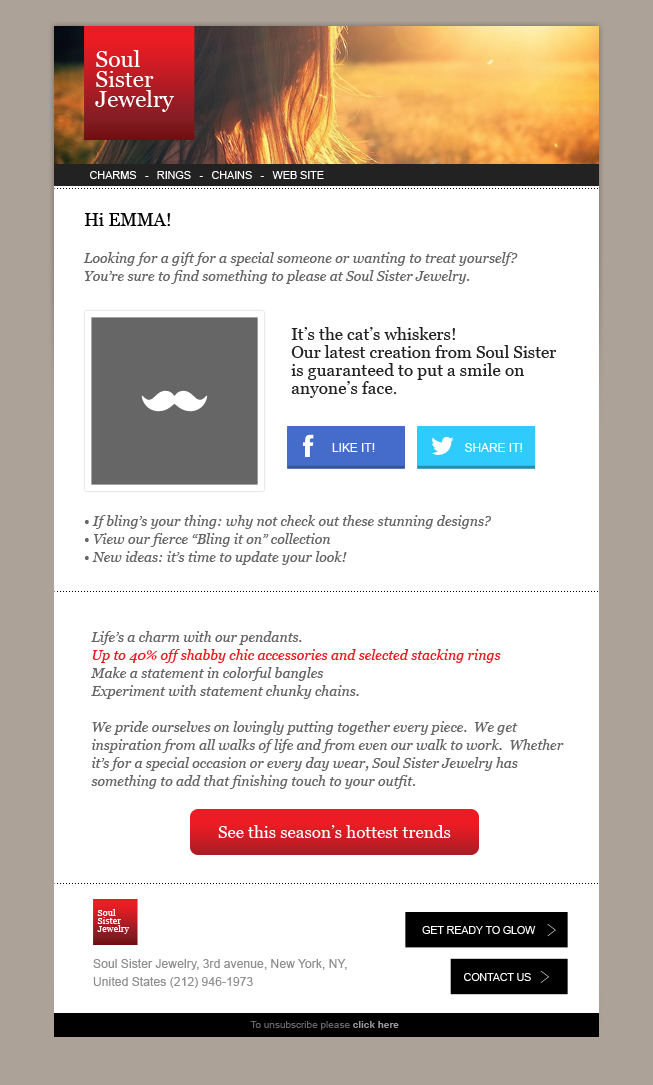
<style>
.page{position:relative;width:653px;height:1085px;background:#ffffff}
.page>*{position:absolute;margin:0}
.t1{font:23px/20px "Georgia";color:#ffffff}
.t2{font:11.2px "ArialMT";letter-spacing:-0.025em;color:#ffffff;text-transform:uppercase}
.t3{font:18px "Georgia";color:#000000;text-transform:uppercase}
.t4{font:18px "Georgia";color:#000000}
.t5{font:14px/18px "Georgia-Italic";color:#666666}
.t6{font:17px/18px "Georgia";color:#222222}
.t7{font:11.9px "ArialMT";color:#ffffff}
.t8{font:14px/18px "Georgia-Italic";color:#ed1c24}
.t9{font:17px "Georgia";color:#ffffff}
.t10{font:9.3px/8.1px "Georgia";color:#ffffff}
.t11{font:10.5px "ArialMT";color:#ffffff;text-transform:uppercase}
.t12{font:12px/18px "ArialMT";color:#8f8f8f}
.t13{font:10px "ArialMT";color:#666666}
.t14{font:10px "Arial-BoldMT";color:#999999}
</style>
<div class="page">
<p class="t1" style="left:95px;top:50px;width:79px;height:62px">Soul <br>Sister<br>Jewelry</p>
<p class="t2" style="left:90px;top:171px;width:234px;height:8px">CHARMS   -   RINGS   -   CHAINS   -   WEB SITE</p>
<p class="t3" style="left:84px;top:213px;width:86px;height:13px">H<span class="t4">i</span> Emma!</p>
<p class="t5" style="left:83px;top:252px;width:435px;height:32px">Looking for a gift for a special someone or wanting to treat yourself?   <br>You’re sure to find something to please at Soul Sister Jewelry.</p>
<p class="t6" style="left:291px;top:327px;width:266px;height:71px">It’s the cat’s whiskers!  <br>Our latest creation from Soul Sister <br>is guaranteed to put a smile on anyone’s face.</p>
<p class="t7" style="left:332px;top:443px;width:43px;height:9px">LIKE IT!</p>
<p class="t7" style="left:465px;top:443px;width:57px;height:9px">SHARE IT!</p>
<p class="t5" style="left:84px;top:515px;width:407px;height:50px">• If bling’s your thing: why not check out these stunning designs?  <br>• View our fierce “Bling it on” collection<br>• New ideas: it’s time to update your look!</p>
<p class="t5" style="left:91px;top:631px;width:473px;height:158px">Life’s a charm with our pendants.  <br><span class="t8">Up to 40% off shabby chic accessories and selected stacking rings <br></span>Make a statement in colorful bangles<br>Experiment with statement chunky chains.  <br><br>We pride ourselves on lovingly putting together every piece.  We get inspiration from all walks of life and from even our walk to work.  Whether it’s for a special occasion or every day wear, Soul Sister Jewelry has something to add that finishing touch to your outfit.</p>
<p class="t9" style="left:218px;top:825px;width:233px;height:13px">See this season’s hottest trends</p>
<p class="t10" style="left:97px;top:909px;width:33px;height:25px">Soul <br>Sister<br>Jewelry</p>
<p class="t11" style="left:422px;top:926px;width:114px;height:8px">gET READY TO GLOW</p>
<p class="t12" style="left:93px;top:959px;width:254px;height:29px">Soul Sister Jewelry, 3rd avenue, New York, NY, United States (212) 946-1973</p>
<p class="t11" style="left:464px;top:973px;width:67px;height:8px">Contact US</p>
<p class="t13" style="left:250px;top:1021px;width:149px;height:9px">To unsubscribe please <span class="t14">click here</span></p>
</div>
